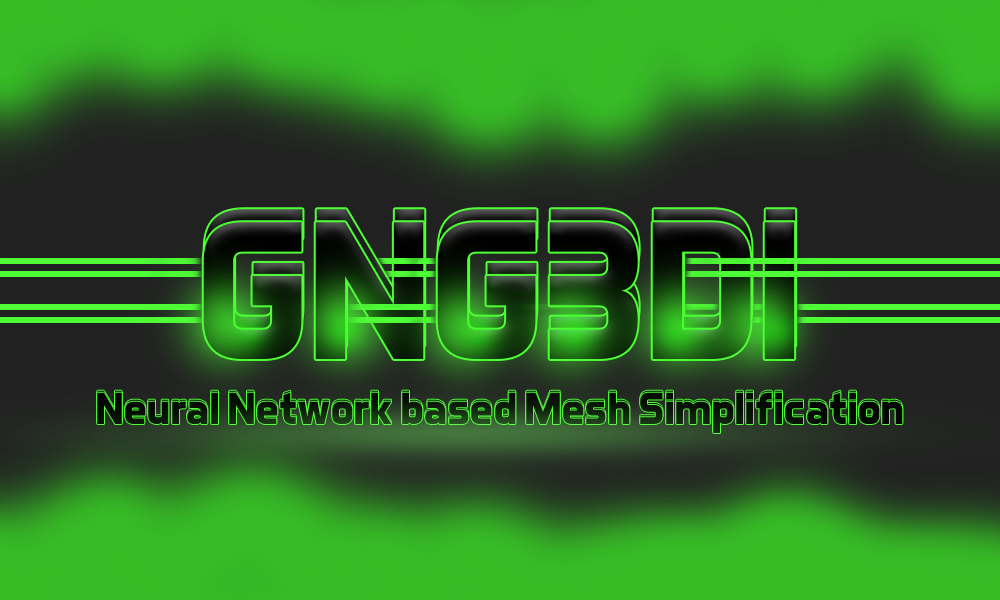
<style>
.page{position:relative;width:1000px;height:600px}
.page>*{position:absolute;margin:0}
.t1{font:200px "AeroMaticsBold";letter-spacing:-0.025em}
.t2{font:45.8px "AeroMaticsBold";letter-spacing:-0.025em}
.t3{font:45.8px "AeroMaticsBold";letter-spacing:-0.025em;color:#0a1609}
</style>
<div class="page">
<p class="t1" style="left:203px;top:222px;width:592px;height:137px">GNG3DI</p>
<p class="t2" style="left:97px;top:390px;width:806px;height:41px">Neural Network based Mesh Simplification</p>
<p class="t3" style="left:97px;top:392px;width:806px;height:41px">Neural Network based Mesh Simplification</p>
</div>
